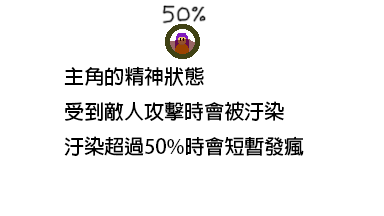
<style>
.page{position:relative;width:384px;height:216px;background:#ffffff}
.page>*{position:absolute;margin:0}
.t1{font:20px "AdobeFanHeitiStd-Bold";color:#000000}
</style>
<div class="page">
<p class="t1" style="left:64px;top:66px;width:240px;height:90px">主角的精神狀態<br>受到敵人攻擊時會被汙染<br>汙染超過50%時會短暫發瘋</p>
</div>
